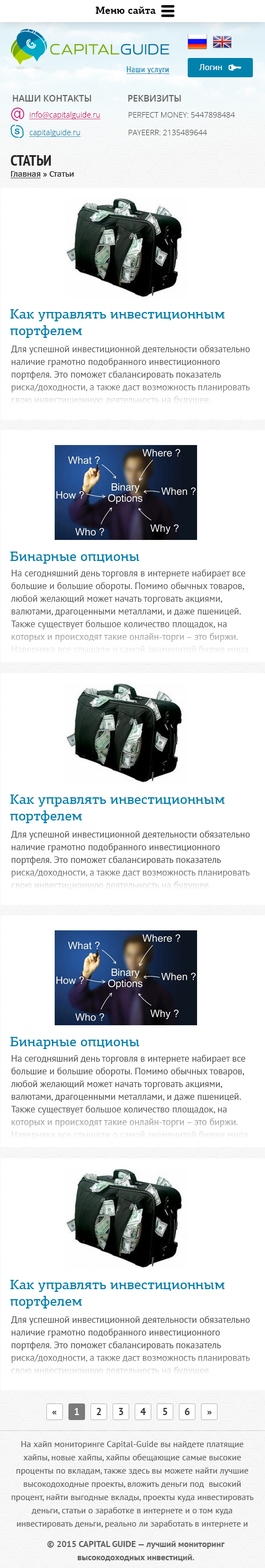
<style>
.page{position:relative;width:265px;height:1568px;background:#ffffff}
.page>*{position:absolute;margin:0}
.t1{font:9.9px "PFCentroSlabPro-Bold";color:#000000}
.t2{font:8.8px "PTSans-Regular";color:#ffffff}
.t3{font:8.8px "PTSans-Narrow";letter-spacing:0.04em;color:#0082ac;text-decoration:underline}
.t4{font:8.8px "OpenSans-Semibold";color:#656565;text-transform:uppercase}
.t5{font:7.7px "OpenSans-Light";color:#cb0069;text-decoration:underline}
.t6{font:7.7px "OpenSans-Light";color:#545454}
.t7{font:7.7px "OpenSans-Light";color:#0082ac;text-decoration:underline}
.t8{font:14.9px "PTSans-NarrowBold";color:#262626;text-transform:uppercase}
.t9{font:7.7px "PTSans-Caption";color:#262626}
.t10{font:7.7px "PTSans-Caption";color:#262626;text-decoration:underline}
.t11{font:13.8px "PFCentroSlabPro-Medium";color:#0082ac}
.t12{font:9.4px/12.7px "PTSans-Regular";color:#575757}
.t13{font:9.9px "PTSans-Bold";color:#ffffff}
.t14{font:9.9px "PTSans-Bold";color:#383838}
.t15{font:8.8px/13.3px "PTSans-Regular";color:#616161}
.t16{font:8.8px/13.3px "PTSans-Bold";color:#616161}
</style>
<div class="page">
<p class="t1" style="left:96px;top:6px;width:60px;height:8px">Меню сайта</p>
<p class="t2" style="left:199px;top:64px;width:23px;height:6px">Логин</p>
<p class="t3" style="left:126px;top:66px;width:43px;height:8px">Наши услуги</p>
<p class="t4" style="left:13px;top:95px;width:78px;height:7px">Наши контакты</p>
<p class="t4" style="left:128px;top:95px;width:53px;height:7px">Реквизиты</p>
<p class="t5" style="left:29px;top:112px;width:71px;height:7px">info@capitalguide.ru</p>
<p class="t6" style="left:129px;top:112px;width:106px;height:6px">PERFECT MONEY: 5447898484</p>
<p class="t7" style="left:29px;top:129px;width:52px;height:8px">capitalguide.ru</p>
<p class="t6" style="left:129px;top:130px;width:78px;height:5px">PAYEERR: 2135489644</p>
<p class="t8" style="left:10px;top:155px;width:41px;height:11px">Статьи</p>
<p class="t9" style="left:10px;top:171px;width:64px;height:7px"><span class="t10">Главная</span> » Статьи</p>
<p class="t11" style="left:10px;top:309px;width:215px;height:29px">Как управлять инвестиционным <br>портфелем</p>
<p class="t12" style="left:11px;top:345px;width:239px;height:60px">Для успешной инвестиционной деятельности обязательно наличие грамотно подобранного инвестиционного портфеля. Это поможет сбалансировать показатель риска/доходности, а также даст возможность планировать свою инвестиционную деятельность на будущее.</p>
<p class="t11" style="left:10px;top:552px;width:129px;height:12px">Бинарные опционы</p>
<p class="t12" style="left:10px;top:569px;width:240px;height:86px">На сегодняшний день торговля в интернете набирает все большие и большие обороты. Помимо обычных товаров, любой желающий может начать торговать акциями, валютами, драгоценными металлами, и даже пшеницей. Также существует большое количество площадок, на которых и происходят такие онлайн-торги – это биржи. Наверняка все слышали о самой знаменитой бирже мира, которая находится по адресу Уолл-Стрит 11, г.Нью-Йорк, и работает уже более 200 лет.</p>
<p class="t13" style="left:75px;top:1408px;width:4px;height:7px">1</p>
<p class="t14" style="left:97px;top:1408px;width:4px;height:7px">2</p>
<p class="t14" style="left:119px;top:1408px;width:4px;height:7px">3</p>
<p class="t14" style="left:140px;top:1408px;width:6px;height:7px">4</p>
<p class="t14" style="left:163px;top:1408px;width:4px;height:7px">5</p>
<p class="t14" style="left:184px;top:1408px;width:6px;height:7px">6</p>
<p class="t14" style="left:52px;top:1411px;width:5px;height:4px">«</p>
<p class="t14" style="left:207px;top:1411px;width:5px;height:4px">»</p>
<p class="t15" style="left:12px;top:1441px;width:241px;height:87px;text-align:center">На хайп мониторинге Capital-Guide вы найдете платящие хайпы, новые хайпы, хайпы обещающие самые высокие проценты по вкладам, также здесь вы можете найти лучшие высокодоходные проекты, вложить деньги под  высокий процент, найти выгодные вклады, проекты куда инвестировать деньги, статьи о заработке в интернете и о том куда инвестировать деньги, реально ли заработать в интернете и куда лучше вложить деньги, как правильно вкладывать деньги, что такое финансовая пирамида и что такое хайп.</p>
<p class="t16" style="left:47px;top:1541px;width:178px;height:20px;text-align:center">© 2015 CAPITAL GUIDE — лучший мониторинг <br>высокодоходных инвестиций.</p>
</div>
